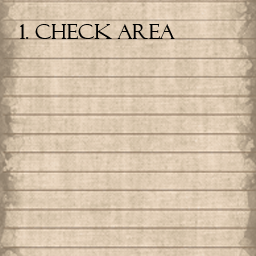
<style>
.page{position:relative;width:256px;height:256px}
.page>*{position:absolute;margin:0}
.t1{font:21px "FelixTitlingMT";color:#000000}
</style>
<div class="page">
<p class="t1" style="left:20px;top:24px;width:155px;height:15px">1. Check area</p>
</div>
